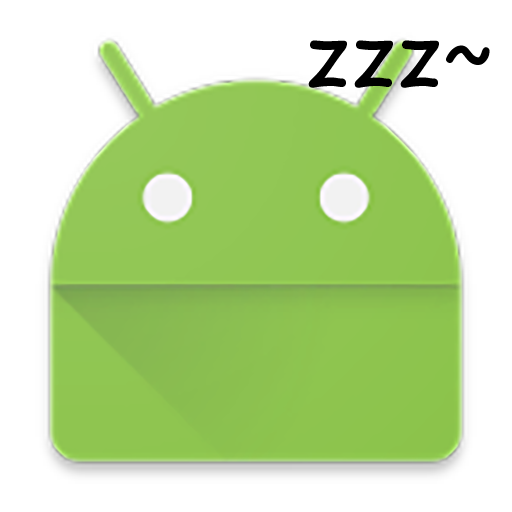
<style>
.page{position:relative;width:512px;height:512px;background:#ffffff}
.page>*{position:absolute;margin:0}
.t1{font:85.5px "ComicSansMS";color:#000000}
</style>
<div class="page">
<p class="t1" style="left:308px;top:40px;width:182px;height:48px">zzz~</p>
</div>
